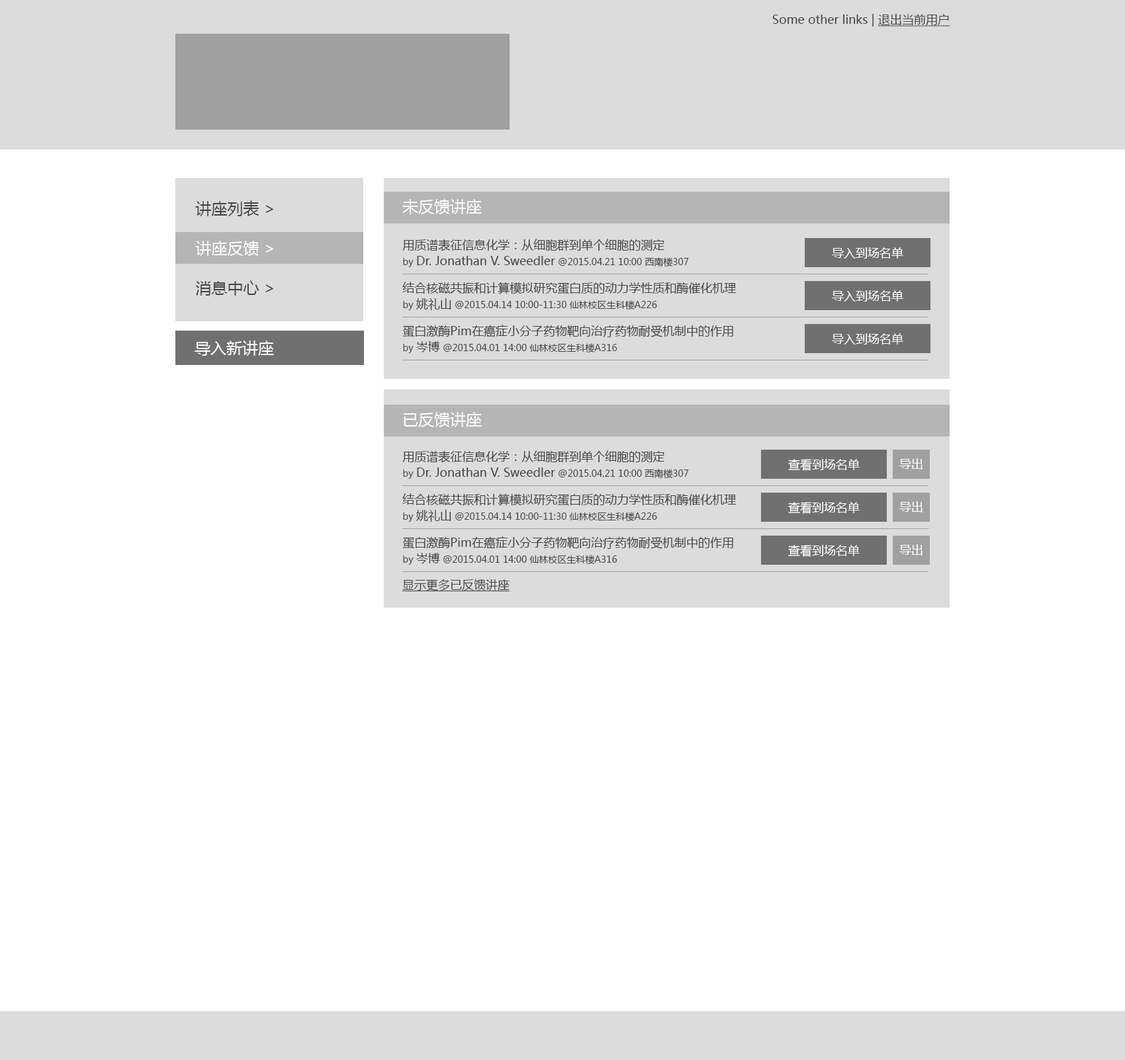
<style>
.page{position:relative;width:1125px;height:1060px;background:#ffffff}
.page>*{position:absolute;margin:0}
.t1{font:11.9px "MicrosoftYaHei";color:#434343}
.t2{font:11.9px "MicrosoftYaHei";color:#434343;text-decoration:underline}
.t3{font:15.9px/39.7px "MicrosoftYaHei";color:#434343}
.t4{font:15.9px/39.7px "MicrosoftYaHei";color:#ffffff}
.t5{font:15.9px "MicrosoftYaHei";color:#ffffff}
.t6{font:11.9px/15.9px "MicrosoftYaHei";color:#434343}
.t7{font:9.3px/15.9px "MicrosoftYaHei";color:#434343}
.t8{font:11.9px "MicrosoftYaHei";color:#ffffff}
</style>
<div class="page">
<p class="t1" style="left:772px;top:14px;width:177px;height:12px">Some other links | <span class="t2">退出当前用户</span></p>
<p class="t3" style="left:195px;top:200px;width:78px;height:96px">讲座列表 &gt;<br><span class="t4">讲座反馈 &gt;<br></span>消息中心 &gt;</p>
<p class="t5" style="left:402px;top:199px;width:80px;height:15px">未反馈讲座</p>
<p class="t6" style="left:402px;top:239px;width:287px;height:28px">用质谱表征信息化学：从细胞群到单个细胞的测定<br><span class="t7">by </span>Dr. Jonathan V. Sweedler<span class="t7"> @2015.04.21 10:00 西南楼307</span></p>
<p class="t8" style="left:831px;top:247px;width:72px;height:12px">导入到场名单</p>
<p class="t7" style="left:402px;top:282px;width:334px;height:28px"><span class="t6">结合核磁共振和计算模拟研究蛋白质的动力学性质和酶催化机理<br></span>by <span class="t6">姚礼山</span> @2015.04.14 10:00-11:30 仙林校区生科楼A226</p>
<p class="t8" style="left:831px;top:290px;width:72px;height:12px">导入到场名单</p>
<p class="t6" style="left:402px;top:325px;width:331px;height:28px">蛋白激酶Pim在癌症小分子药物靶向治疗药物耐受机制中的作用<br><span class="t7">by </span>岑博<span class="t7"> @2015.04.01 14:00 仙林校区生科楼A316</span></p>
<p class="t5" style="left:194px;top:341px;width:80px;height:15px">导入新讲座</p>
<p class="t8" style="left:831px;top:333px;width:72px;height:12px">导入到场名单</p>
<p class="t5" style="left:403px;top:412px;width:79px;height:15px">已反馈讲座</p>
<p class="t6" style="left:402px;top:450px;width:287px;height:29px">用质谱表征信息化学：从细胞群到单个细胞的测定<br><span class="t7">by </span>Dr. Jonathan V. Sweedler<span class="t7"> @2015.04.21 10:00 西南楼307</span></p>
<p class="t8" style="left:788px;top:459px;width:71px;height:12px">查看到场名单</p>
<p class="t8" style="left:899px;top:458px;width:23px;height:12px">导出</p>
<p class="t7" style="left:402px;top:493px;width:334px;height:29px"><span class="t6">结合核磁共振和计算模拟研究蛋白质的动力学性质和酶催化机理<br></span>by <span class="t6">姚礼山</span> @2015.04.14 10:00-11:30 仙林校区生科楼A226</p>
<p class="t8" style="left:788px;top:502px;width:71px;height:12px">查看到场名单</p>
<p class="t8" style="left:899px;top:501px;width:23px;height:12px">导出</p>
<p class="t6" style="left:402px;top:536px;width:331px;height:29px">蛋白激酶Pim在癌症小分子药物靶向治疗药物耐受机制中的作用<br><span class="t7">by </span>岑博<span class="t7"> @2015.04.01 14:00 仙林校区生科楼A316</span></p>
<p class="t8" style="left:788px;top:545px;width:71px;height:12px">查看到场名单</p>
<p class="t8" style="left:899px;top:544px;width:23px;height:12px">导出</p>
<p class="t2" style="left:402px;top:579px;width:107px;height:13px">显示更多已反馈讲座</p>
</div>
